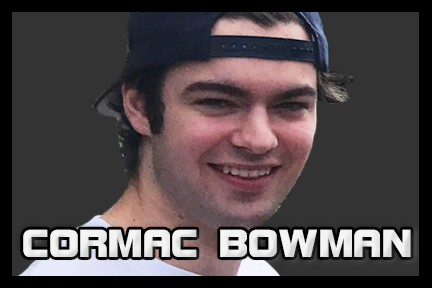
<style>
.page{position:relative;width:432px;height:288px;background:#333333}
.page>*{position:absolute;margin:0}
.t1{font:41.7px "BolsterBold";color:#f3f3f3}
</style>
<div class="page">
<p class="t1" style="left:23px;top:229px;width:388px;height:28px">CORMAC BOWMAN</p>
</div>
